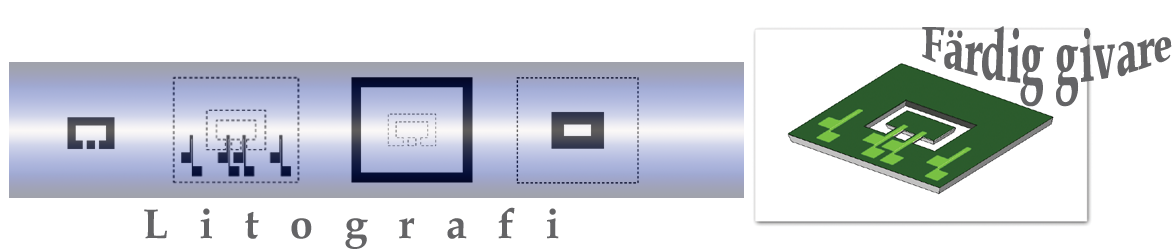
<style>
.page{position:relative;width:1175px;height:250px;background:#ffffff}
.page>*{position:absolute;margin:0}
.t1{font:41.7px "BookAntiqua-Bold";color:#646466}
</style>
<div class="page">
<p class="t1" style="left:922px;top:26px;width:250px;height:81px">Färdig givare</p>
<p class="t1" style="left:144px;top:207px;width:415px;height:42px">L   i   t   o   g   r   a   f   i</p>
</div>
